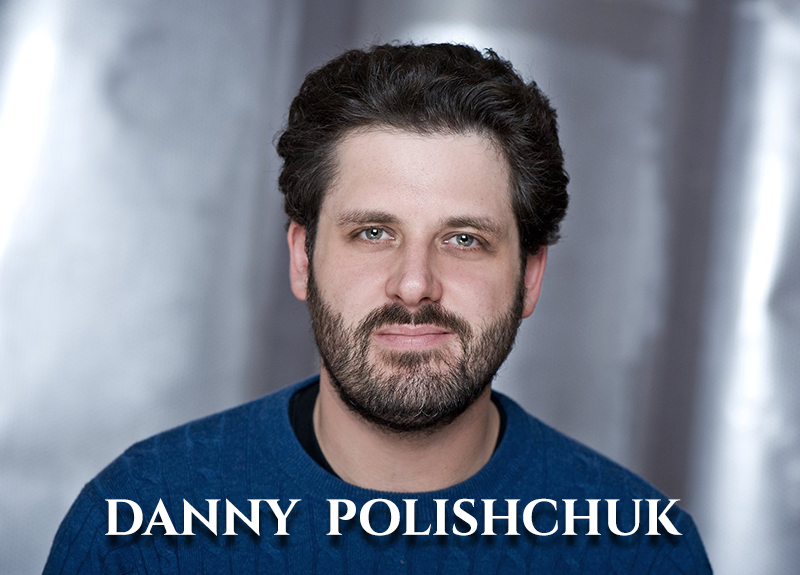
<style>
.page{position:relative;width:800px;height:575px}
.page>*{position:absolute;margin:0}
.t1{font:50px "Cinzel-Bold";color:#ffffff;text-transform:uppercase}
</style>
<div class="page">
<p class="t1" style="left:105px;top:498px;width:578px;height:38px">DANNY  POLISHCHUK</p>
</div>
